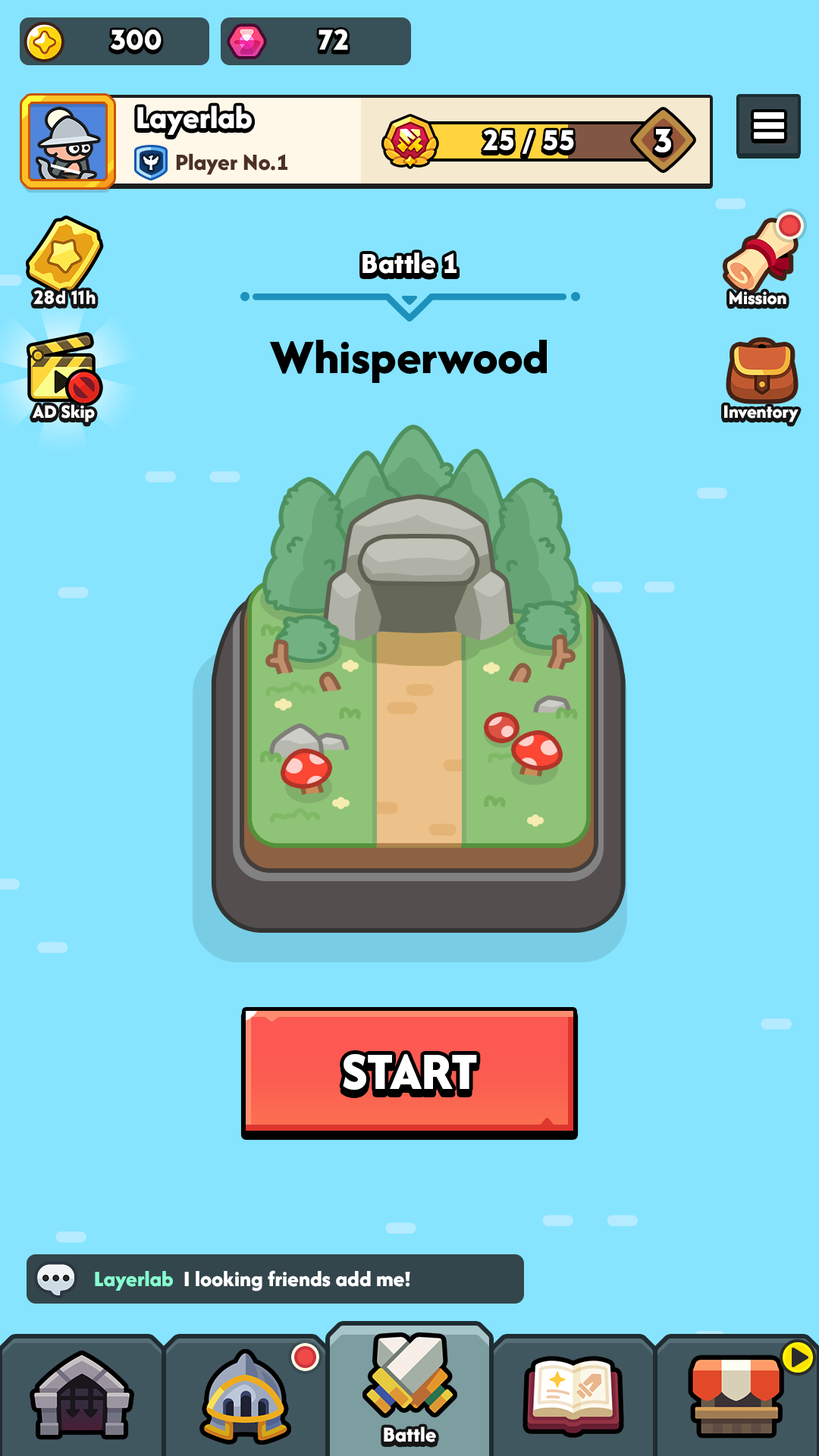
<style>
.page{position:relative;width:819px;height:1456px;background:#86e4ff}
.page>*{position:absolute;margin:0}
.t1{font:29.6px "LTAvocado-Bold";color:#ffffff}
.t2{font:33.4px "AfacadFlux-ExtraBold";color:#ffffff}
.t3{font:29.6px "LTAvocado-Bold";color:#ffffff;text-transform:uppercase}
.t4{font:34.9px "LTAvocado-Bold";color:#ffffff;text-transform:uppercase}
.t5{font:24.3px "AfacadFlux-ExtraBold";color:#4d3024}
.t6{font:30.3px "AfacadFlux-ExtraBold";color:#ffffff}
.t7{font:19.7px "LTAvocado-Bold";color:#ffffff}
.t8{font:19.7px "AfacadFlux-ExtraBold";color:#ffffff}
.t9{font:50px "AfacadFlux-ExtraBold";color:#000000}
.t10{font:54.6px "AfacadFlux-ExtraBold";color:#ffffff;text-transform:uppercase}
.t11{font:22.7px "AfacadFlux-ExtraBold";letter-spacing:0.005em;color:#ffffff}
.t12{font:22.7px "AfacadFlux-ExtraBold";letter-spacing:0.005em;color:#86ffd0}
.t13{font:22px "AfacadFlux-ExtraBold";color:#ffffff}
</style>
<div class="page">
<p class="t1" style="left:111px;top:30px;width:51px;height:20px">300</p>
<p class="t1" style="left:318px;top:29px;width:30px;height:21px">72</p>
<p class="t2" style="left:137px;top:105px;width:115px;height:30px">Layerlab</p>
<p class="t3" style="left:483px;top:130px;width:91px;height:24px">25 / 55</p>
<p class="t4" style="left:654px;top:129px;width:17px;height:23px">3</p>
<p class="t5" style="left:176px;top:153px;width:111px;height:22px">Player No.1</p>
<p class="t6" style="left:362px;top:253px;width:95px;height:21px">Battle 1</p>
<p class="t7" style="left:33px;top:290px;width:63px;height:14px">28d 11h</p>
<p class="t8" style="left:730px;top:291px;width:56px;height:14px">Mission</p>
<p class="t9" style="left:269px;top:340px;width:278px;height:43px">Whisperwood</p>
<p class="t8" style="left:33px;top:404px;width:62px;height:18px">AD Skip</p>
<p class="t8" style="left:724px;top:405px;width:75px;height:17px">Inventory</p>
<p class="t10" style="left:343px;top:1054px;width:134px;height:36px">Start</p>
<p class="t11" style="left:95px;top:1270px;width:315px;height:21px"><span class="t12">Layerlab</span>  I looking friends add me!</p>
<p class="t13" style="left:384px;top:1426px;width:52px;height:16px">Battle</p>
</div>
